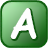
<style>
.page{position:relative;width:48px;height:48px}
.page>*{position:absolute;margin:0}
.t1{font:40px "ComicSansMS-Bold";color:#ffffff}
</style>
<div class="page">
<p class="t1" style="left:10px;top:8px;width:27px;height:31px">A</p>
</div>
